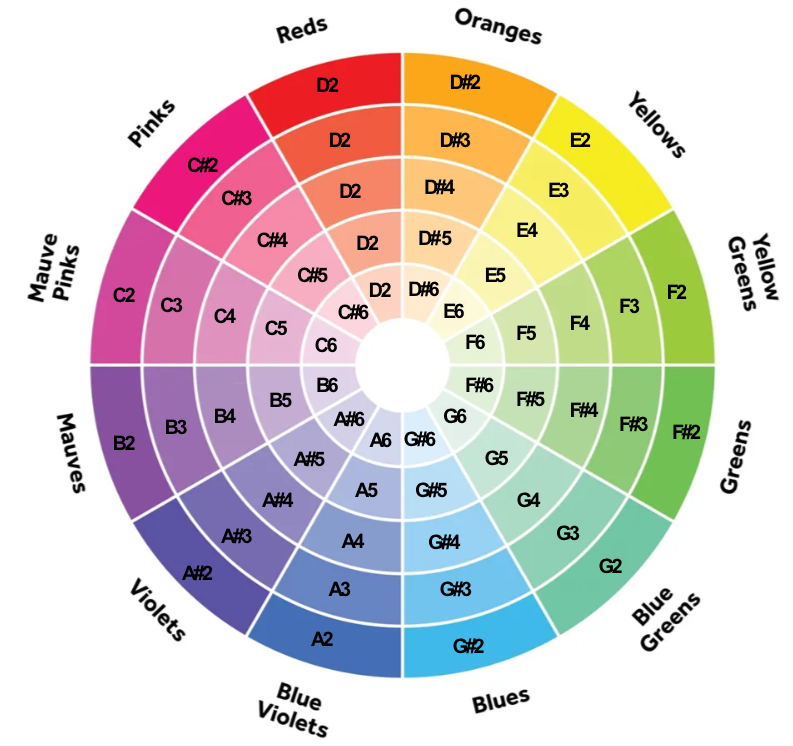
<style>
.page{position:relative;width:793px;height:746px;background:#ffffff}
.page>*{position:absolute;margin:0}
.t1{font:20px "Arial-BoldMT";letter-spacing:-0.132em;color:#000000}
</style>
<div class="page">
<p class="t1" style="left:317px;top:77px;width:22px;height:15px">D2</p>
<p class="t1" style="left:450px;top:74px;width:31px;height:16px">D#2</p>
<p class="t1" style="left:329px;top:132px;width:22px;height:15px">D2</p>
<p class="t1" style="left:440px;top:132px;width:31px;height:16px">D#3</p>
<p class="t1" style="left:570px;top:132px;width:21px;height:15px">E2</p>
<p class="t1" style="left:188px;top:157px;width:30px;height:16px">C#2</p>
<p class="t1" style="left:340px;top:183px;width:21px;height:15px">D2</p>
<p class="t1" style="left:425px;top:179px;width:30px;height:16px">D#4</p>
<p class="t1" style="left:549px;top:182px;width:20px;height:16px">E3</p>
<p class="t1" style="left:222px;top:190px;width:30px;height:16px">C#3</p>
<p class="t1" style="left:517px;top:222px;width:21px;height:15px">E4</p>
<p class="t1" style="left:257px;top:232px;width:31px;height:16px">C#4</p>
<p class="t1" style="left:419px;top:230px;width:33px;height:16px">D# 5</p>
<p class="t1" style="left:357px;top:235px;width:22px;height:15px">D2</p>
<p class="t1" style="left:298px;top:267px;width:30px;height:16px">C#5</p>
<p class="t1" style="left:485px;top:267px;width:21px;height:16px">E5</p>
<p class="t1" style="left:409px;top:281px;width:30px;height:16px">D#6</p>
<p class="t1" style="left:113px;top:287px;width:22px;height:16px">C2</p>
<p class="t1" style="left:369px;top:282px;width:22px;height:15px">D2</p>
<p class="t1" style="left:668px;top:284px;width:19px;height:15px">F2</p>
<p class="t1" style="left:161px;top:297px;width:22px;height:16px">C3</p>
<p class="t1" style="left:338px;top:304px;width:31px;height:16px">C#6</p>
<p class="t1" style="left:444px;top:303px;width:20px;height:16px">E6</p>
<p class="t1" style="left:620px;top:298px;width:20px;height:16px">F3</p>
<p class="t1" style="left:214px;top:308px;width:22px;height:16px">C4</p>
<p class="t1" style="left:571px;top:315px;width:19px;height:15px">F4</p>
<p class="t1" style="left:265px;top:320px;width:22px;height:16px">C5</p>
<p class="t1" style="left:517px;top:325px;width:19px;height:16px">F5</p>
<p class="t1" style="left:315px;top:337px;width:22px;height:16px">C6</p>
<p class="t1" style="left:466px;top:334px;width:19px;height:16px">F6</p>
<p class="t1" style="left:317px;top:377px;width:21px;height:16px">B6</p>
<p class="t1" style="left:466px;top:377px;width:28px;height:16px">F#6</p>
<p class="t1" style="left:270px;top:392px;width:22px;height:16px">B5</p>
<p class="t1" style="left:517px;top:391px;width:28px;height:16px">F#5</p>
<p class="t1" style="left:215px;top:408px;width:21px;height:15px">B4</p>
<p class="t1" style="left:333px;top:411px;width:32px;height:16px">A#6</p>
<p class="t1" style="left:444px;top:408px;width:23px;height:16px">G6</p>
<p class="t1" style="left:571px;top:402px;width:28px;height:16px">F#4</p>
<p class="t1" style="left:166px;top:419px;width:21px;height:16px">B3</p>
<p class="t1" style="left:620px;top:416px;width:28px;height:16px">F#3</p>
<p class="t1" style="left:673px;top:424px;width:28px;height:16px">F#2</p>
<p class="t1" style="left:114px;top:435px;width:21px;height:15px">B2</p>
<p class="t1" style="left:369px;top:432px;width:23px;height:16px">A6</p>
<p class="t1" style="left:404px;top:431px;width:32px;height:16px">G#6</p>
<p class="t1" style="left:293px;top:451px;width:32px;height:16px">A#5</p>
<p class="t1" style="left:485px;top:450px;width:23px;height:16px">G5</p>
<p class="t1" style="left:355px;top:482px;width:23px;height:16px">A5</p>
<p class="t1" style="left:416px;top:482px;width:31px;height:16px">G#5</p>
<p class="t1" style="left:262px;top:492px;width:32px;height:16px">A#4</p>
<p class="t1" style="left:517px;top:492px;width:24px;height:16px">G4</p>
<p class="t1" style="left:221px;top:528px;width:31px;height:16px">A#3</p>
<p class="t1" style="left:341px;top:533px;width:24px;height:15px">A4</p>
<p class="t1" style="left:429px;top:534px;width:32px;height:16px">G#4</p>
<p class="t1" style="left:557px;top:525px;width:23px;height:16px">G3</p>
<p class="t1" style="left:599px;top:558px;width:23px;height:16px">G2</p>
<p class="t1" style="left:182px;top:565px;width:31px;height:16px">A#2</p>
<p class="t1" style="left:328px;top:581px;width:23px;height:16px">A3</p>
<p class="t1" style="left:440px;top:581px;width:32px;height:16px">G#3</p>
<p class="t1" style="left:311px;top:631px;width:22px;height:15px">A2</p>
<p class="t1" style="left:453px;top:638px;width:31px;height:16px">G#2</p>
</div>
